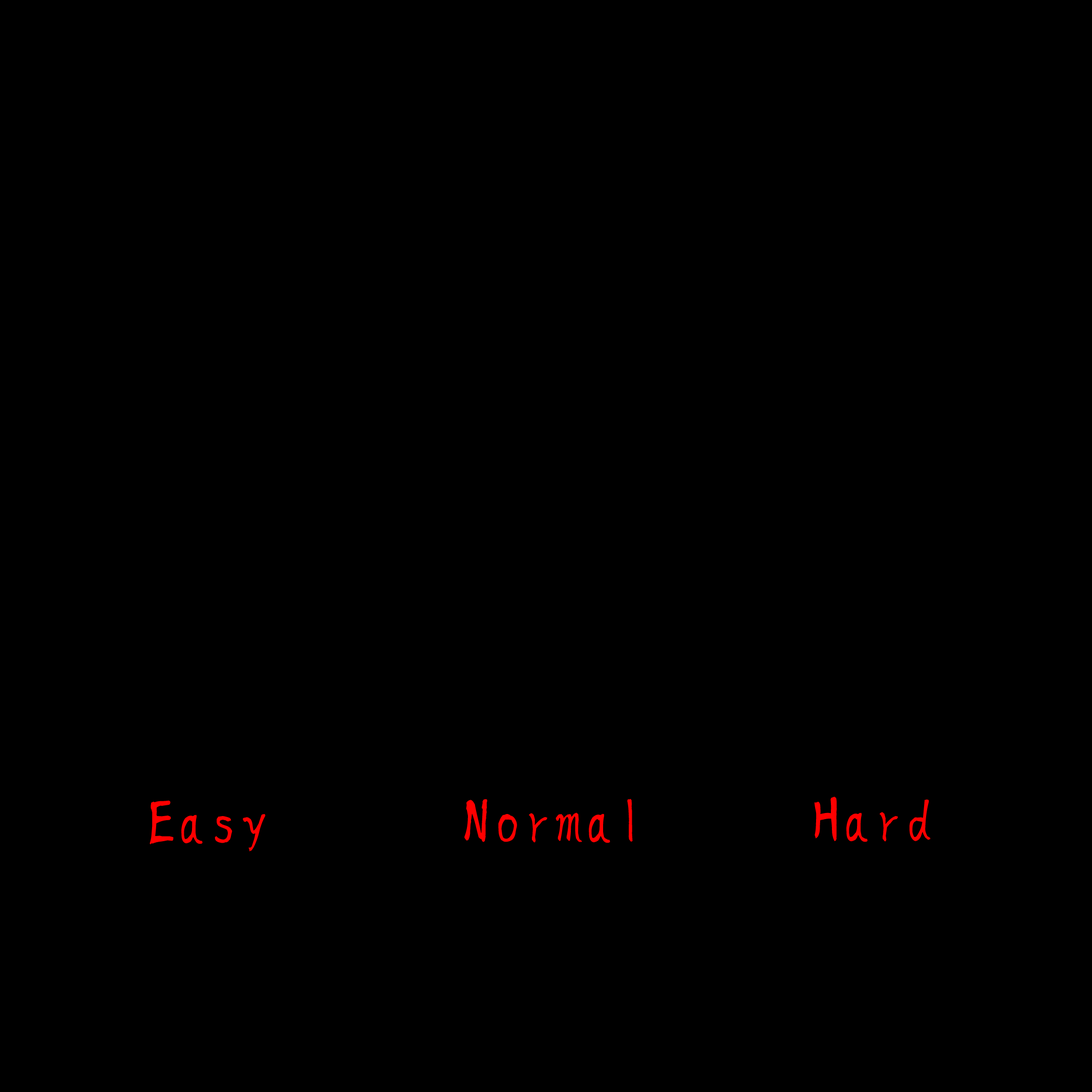
<style>
.page{position:relative;width:1092px;height:1092px;background:#000000}
.page>*{position:absolute;margin:0}
.t1{font:62.1px "aoyagireisyosimo2";color:#ff0000}
</style>
<div class="page">
<p class="t1" style="left:814px;top:797px;width:117px;height:45px">Hard</p>
<p class="t1" style="left:149px;top:800px;width:117px;height:51px">Easy</p>
<p class="t1" style="left:464px;top:799px;width:169px;height:44px">Normal</p>
</div>
